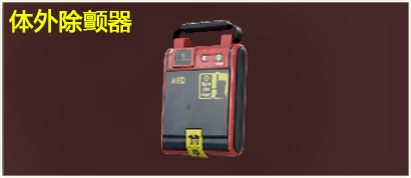
<style>
.page{position:relative;width:411px;height:178px}
.page>*{position:absolute;margin:0}
.t1{font:24px "MicrosoftYaHeiUI";color:#f4ff00;font-weight:bold}
</style>
<div class="page">
<p class="t1" style="left:9px;top:9px;width:123px;height:24px">体外除颤器</p>
</div>
